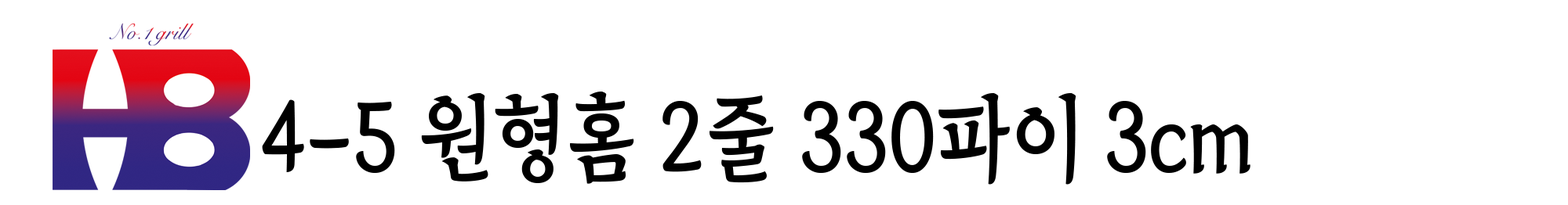
<style>
.page{position:relative;width:1568px;height:205px;background:#ffffff}
.page>*{position:absolute;margin:0}
.t1{font:93.7px "TheIndependenceHallofKorea-Regular";color:#000000;scale:0.89 1}
</style>
<div class="page">
<p class="t1" style="left:262px;top:92px;width:988px;height:93px">4-5 원형홈 2줄 330파이 3cm</p>
</div>
